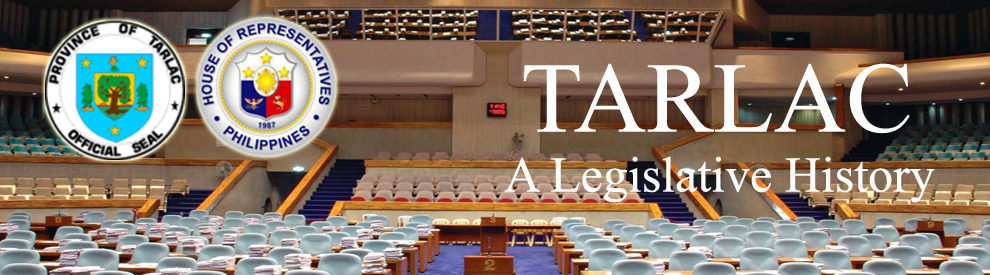
<style>
.page{position:relative;width:990px;height:275px}
.page>*{position:absolute;margin:0}
.t1{font:50px "TimesNewRomanPSMT";color:#fdfcfc}
.t2{font:100px "TimesNewRomanPSMT";color:#fdfdfd}
</style>
<div class="page">
<p class="t1" style="left:504px;top:63px;width:431px;height:140px;text-align:center"><span class="t2">TARLAC<br></span>A Legislative History</p>
</div>
